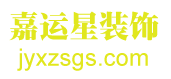
<style>
.page{position:relative;width:171px;height:79px;background:#ffffff}
.page>*{position:absolute;margin:0}
.t1{font:30px "SungtiEG-Ultra-?";color:#e1e71e}
.t2{font:24px "ArialMT";color:#e1e71e}
</style>
<div class="page">
<p class="t1" style="left:9px;top:11px;width:150px;height:30px">嘉运星装饰</p>
<p class="t2" style="left:17px;top:48px;width:131px;height:23px">jyxzsgs.com</p>
</div>
